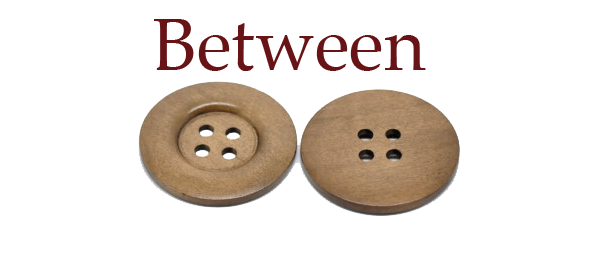
<style>
.page{position:relative;width:600px;height:270px;background:#ffffff}
.page>*{position:absolute;margin:0}
.t1{font:72px "Palatino-Roman";color:#681416}
</style>
<div class="page">
<p class="t1" style="left:154px;top:19px;width:272px;height:52px">Between</p>
</div>
